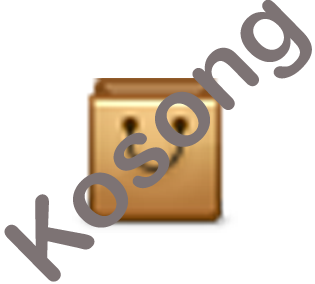
<style>
.page{position:relative;width:315px;height:284px;background:#ffffff}
.page>*{position:absolute;margin:0}
.t1{font:100.4px "ArialRoundedMTBold";color:#7d7374}
</style>
<div class="page">
<p class="t1" style="left:4px;top:0px;width:308px;height:282px;rotate:-45deg">Kosong</p>
</div>
